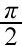
<style>
.page{position:relative;width:22px;height:46px;background:#ffffff}
.page>*{position:absolute;margin:0}
.t1{font:26.4px "TimesNewRomanPS-ItalicMT";color:#000000}
.t2{font:26.4px "TimesNewRomanPSMT";color:#000000}
</style>
<div class="page">
<p class="t1" style="left:4px;top:6px;width:15px;height:13px">π</p>
<p class="t2" style="left:5px;top:27px;width:12px;height:18px">2</p>
</div>
